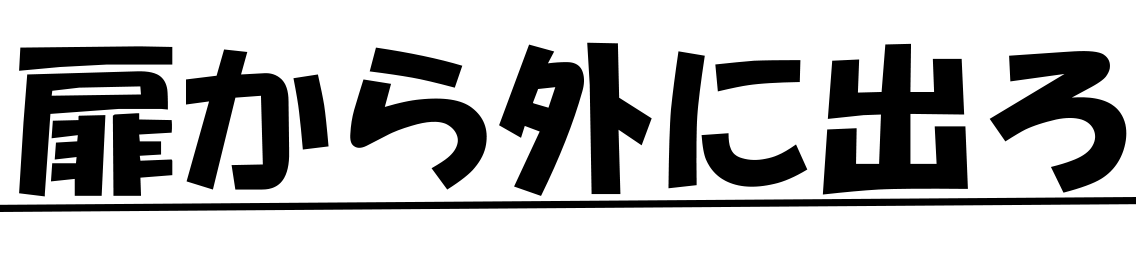
<style>
.page{position:relative;width:1136px;height:256px;background:#ffffff}
.page>*{position:absolute;margin:0}
.t1{font:160px "HGSoeiKakupoptai";color:#000000}
</style>
<div class="page">
<p class="t1" style="left:19px;top:42px;width:1108px;height:155px">扉から外に出ろ</p>
</div>
